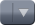
<style>
.page{position:relative;width:35px;height:25px;background:#878f9e}
.page>*{position:absolute;margin:0}
.t1{font:12.8px "ArialMT";letter-spacing:0.1em;color:#c5c8ce;scale:1.25 1}
</style>
<div class="page">
<p class="t1" style="left:17px;top:8px;width:12px;height:9px">▼</p>
</div>
